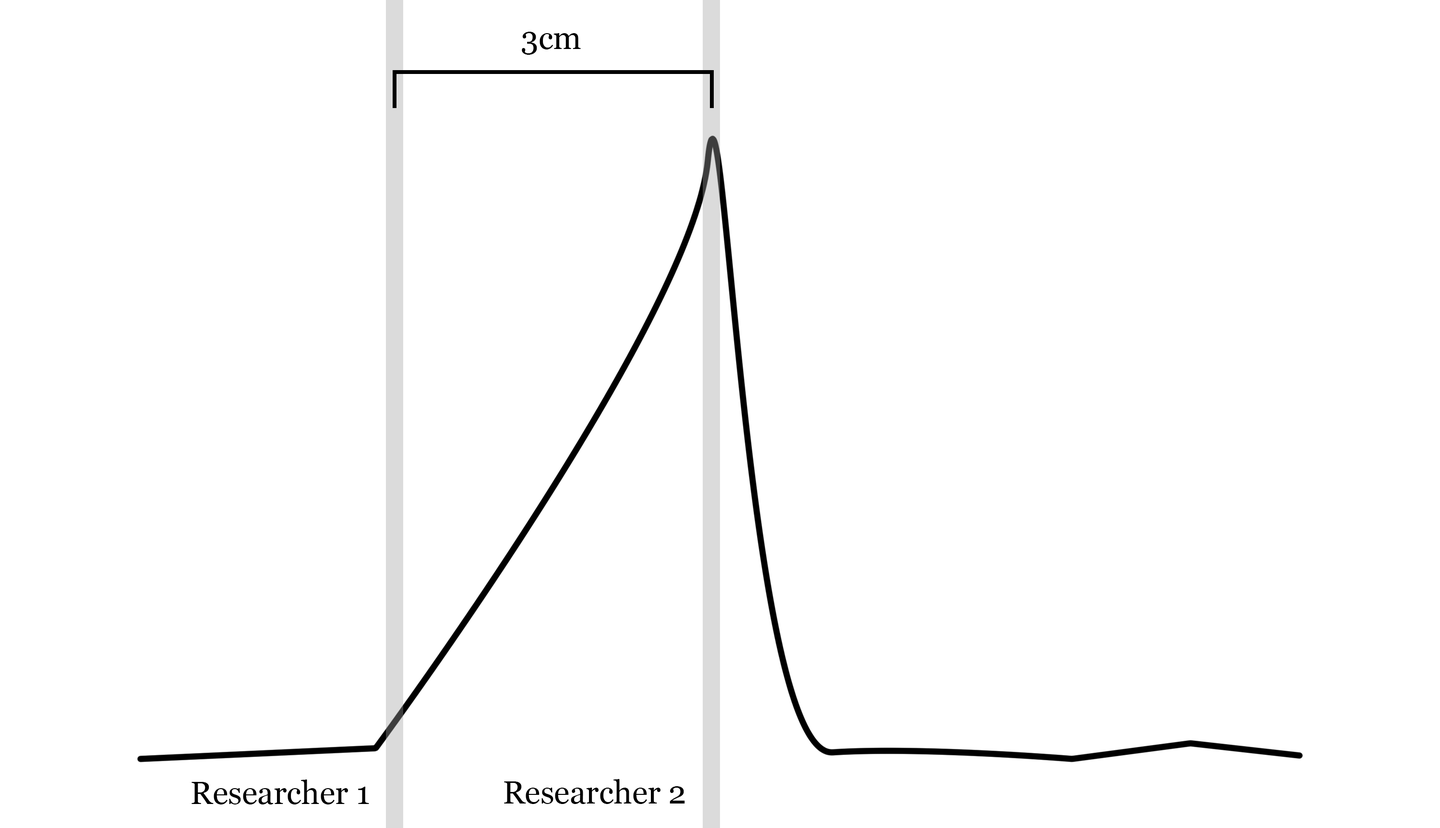
<style>
.page{position:relative;width:1440px;height:828px;background:#ffffff}
.page>*{position:absolute;margin:0}
.t1{font:32px "Georgia";color:#000000}
</style>
<div class="page">
<p class="t1" style="left:522px;top:32px;width:59px;height:23px">3cm</p>
<p class="t1" style="left:192px;top:779px;width:177px;height:25px">Researcher 1</p>
<p class="t1" style="left:504px;top:779px;width:181px;height:25px">Researcher 2</p>
</div>
